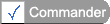
<style>
.page{position:relative;width:110px;height:24px;background:#999999}
.page>*{position:absolute;margin:0}
.t1{font:14px "ArialMT";color:#ffffff}
</style>
<div class="page">
<p class="t1" style="left:29px;top:5px;width:77px;height:17px">Commander</p>
</div>
